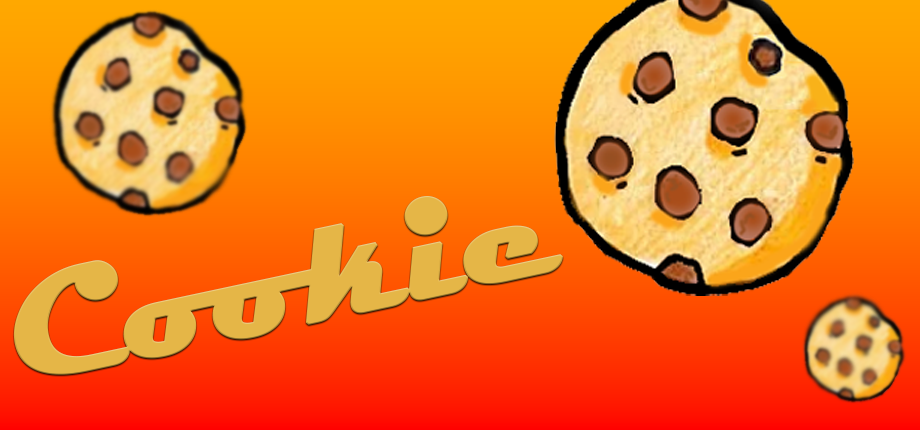
<style>
.page{position:relative;width:920px;height:430px}
.page>*{position:absolute;margin:0}
.t1{font:150px "Magneto-Bold";color:#e5b647;font-weight:bold}
</style>
<div class="page">
<p class="t1" style="left:13px;top:196px;width:550px;height:179px;rotate:-12deg">Cookie</p>
</div>
